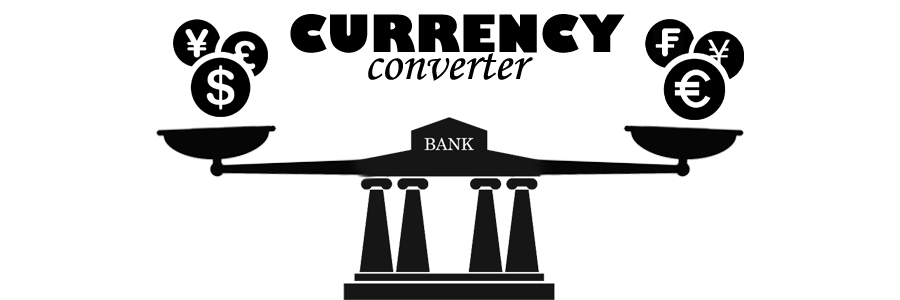
<style>
.page{position:relative;width:900px;height:300px;background:#ffffff}
.page>*{position:absolute;margin:0}
.t1{font:50px "GillSans-UltraBold";color:#000000}
.t2{font:50px "MonotypeCorsiva";color:#000000}
</style>
<div class="page">
<p class="t1" style="left:290px;top:14px;width:335px;height:39px">CURRENCY</p>
<p class="t2" style="left:368px;top:53px;width:165px;height:28px">converter</p>
</div>
